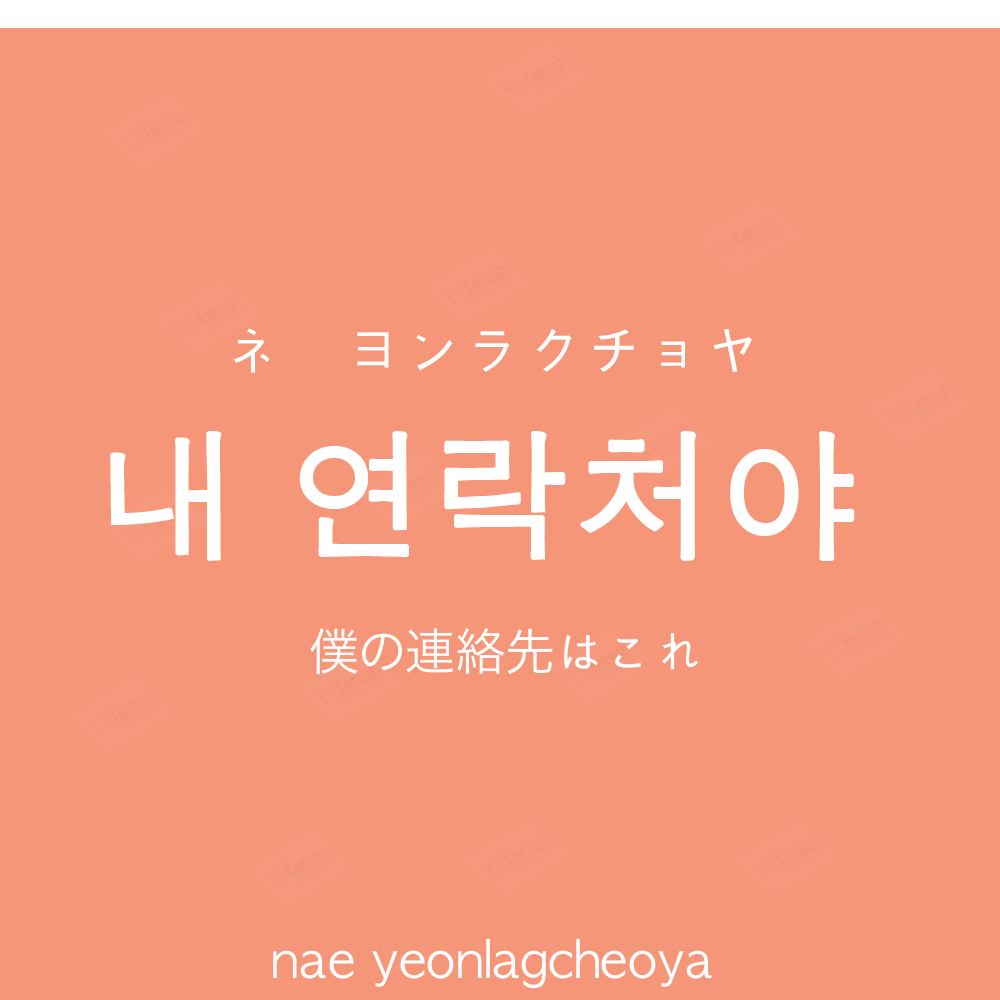
<style>
.page{position:relative;width:1000px;height:1000px;background:#f69679}
.page>*{position:absolute;margin:0}
.t1{font:60px "AppleGothic";color:#ffffff}
.t2{font:140px "AppleGothic";color:#ffffff;font-weight:bold}
.t3{font:50px "HiraKakuProN-W3";color:#ffffff}
.t4{font:50px "AppleGothic";color:#ffffff}
</style>
<div class="page">
<p class="t1" style="left:233px;top:328px;width:519px;height:45px">ネ　ヨンラクチョヤ</p>
<p class="t2" style="left:110px;top:431px;width:745px;height:130px">내 연락처야</p>
<p class="t3" style="left:310px;top:628px;width:388px;height:46px">僕の連絡先<span class="t4">はこれ</span></p>
<p class="t4" style="left:273px;top:938px;width:439px;height:51px">nae yeonlagcheoya</p>
</div>
